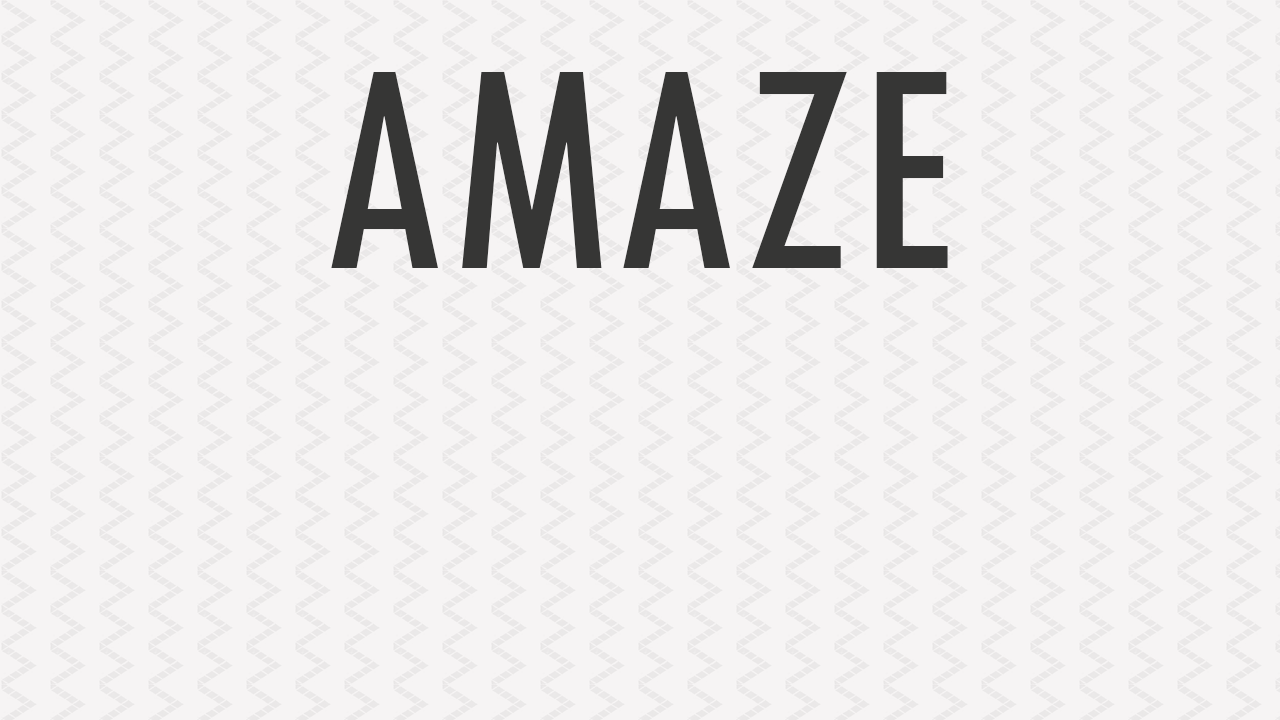
<style>
.page{position:relative;width:1280px;height:720px;background:#f6f4f4}
.page>*{position:absolute;margin:0}
.t1{font:315px "TwCenMT-Condensed";color:#363635}
</style>
<div class="page">
<p class="t1" style="left:331px;top:72px;width:617px;height:196px">AMAZE</p>
</div>
